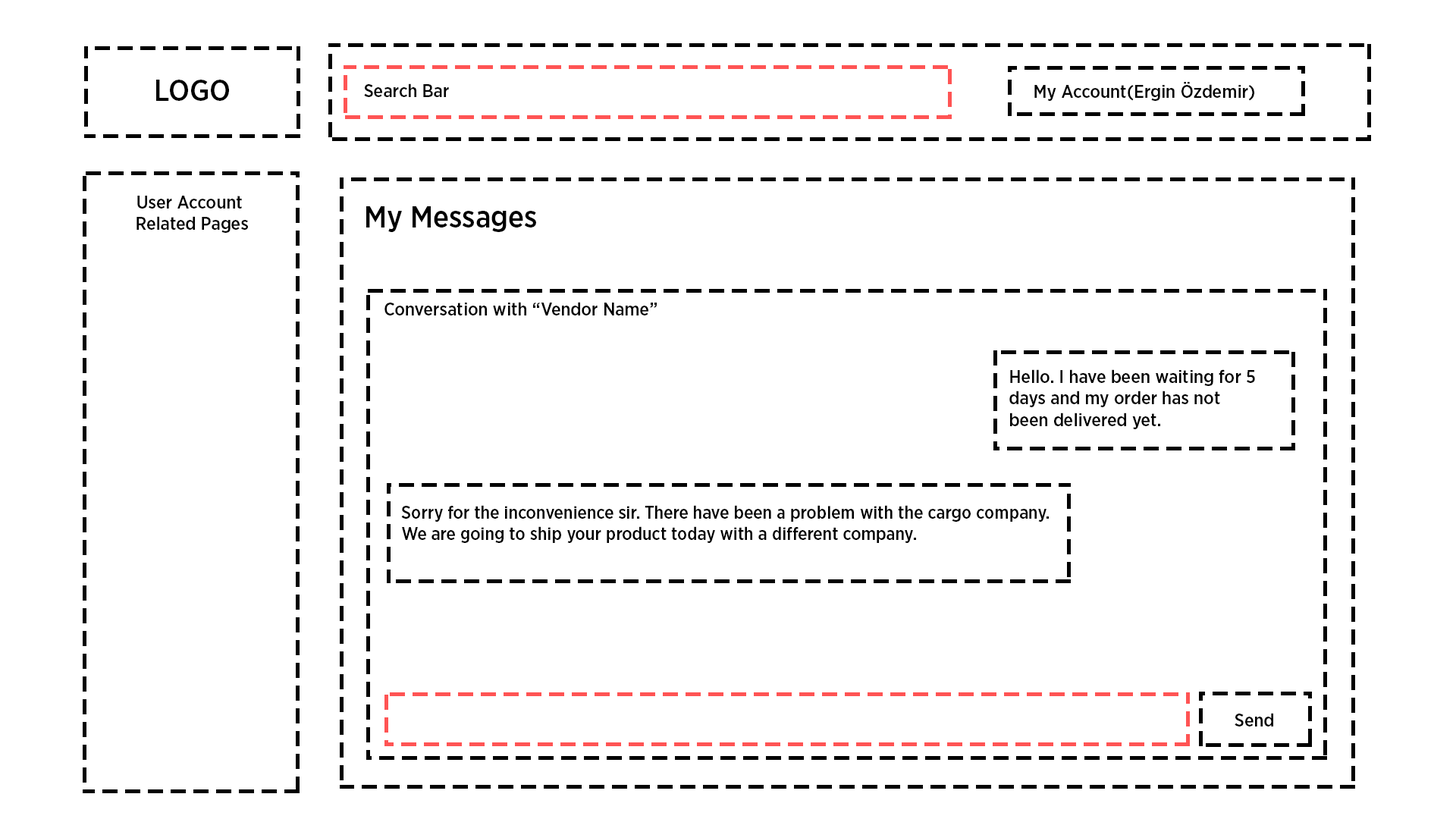
<style>
.page{position:relative;width:1456px;height:819px;background:#ffffff}
.page>*{position:absolute;margin:0}
.t1{font:29.7px "GothamNarrow-Medium";color:#000000}
.t2{font:18.2px "GothamNarrow-Medium";color:#000000}
.t3{font:30.4px "GothamNarrow-Medium";color:#000000}
.t4{font:17.7px "GothamNarrow-Medium";color:#000000}
</style>
<div class="page">
<p class="t1" style="left:156px;top:80px;width:73px;height:21px">LOGO</p>
<p class="t2" style="left:364px;top:83px;width:85px;height:14px">Search Bar</p>
<p class="t2" style="left:1034px;top:82px;width:220px;height:19px">My Account(Ergin Özdemir)</p>
<p class="t2" style="left:136px;top:196px;width:112px;height:37px;text-align:center">User Account <br>Related Pages</p>
<p class="t3" style="left:366px;top:206px;width:170px;height:26px">My Messages</p>
<p class="t2" style="left:384px;top:302px;width:273px;height:13px">Conversation with “Vendor Name”</p>
<p class="t2" style="left:1009px;top:369px;width:246px;height:60px">Hello. I have been waiting for 5 <br>days and my order has not <br>been delivered yet.</p>
<p class="t4" style="left:401px;top:505px;width:648px;height:38px">Sorry for the inconvenience sir. There have been a problem with the cargo company. <br>We are going to ship your product today with a different company.</p>
<p class="t2" style="left:1235px;top:713px;width:38px;height:13px">Send</p>
</div>
